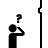
<style>
.page{position:relative;width:48px;height:48px;background:#ffffff}
.page>*{position:absolute;margin:0}
.t1{font:12px "Autumn";color:#000000}
</style>
<div class="page">
<p class="t1" style="left:16px;top:14px;width:6px;height:9px">?</p>
</div>
